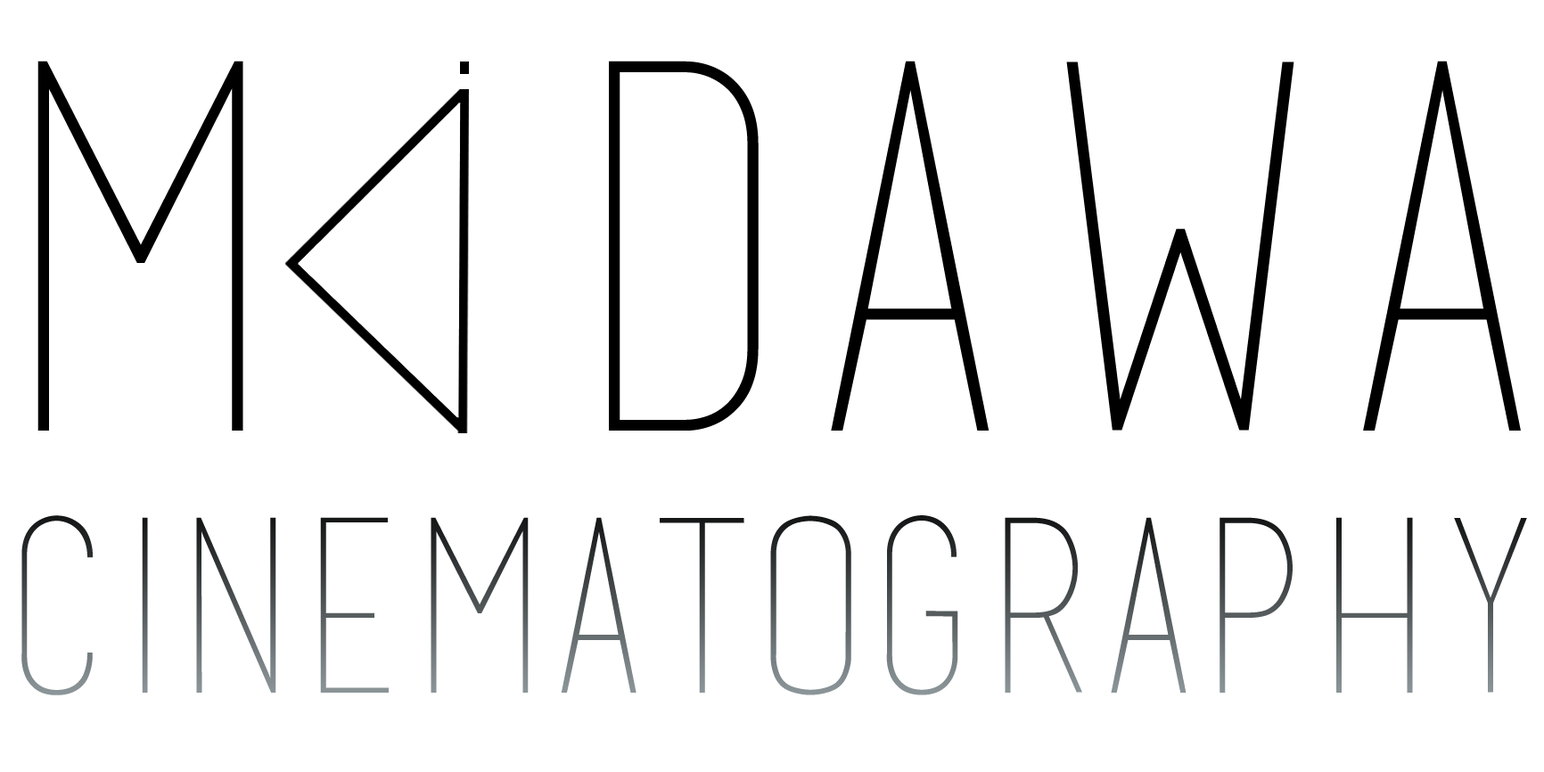
<style>
.page{position:relative;width:1544px;height:772px;background:#ffffff}
.page>*{position:absolute;margin:0}
.t1{font:507.7px "basictitlefont";color:#000000}
.t2{font:240.2px "basictitlefont"}
</style>
<div class="page">
<p class="t1" style="left:37px;top:61px;width:206px;height:370px">M</p>
<p class="t1" style="left:609px;top:61px;width:912px;height:370px">dawa</p>
<p class="t2" style="left:21px;top:515px;width:1506px;height:180px">CINEMATOGRAPHY</p>
</div>
